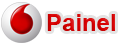
<style>
.page{position:relative;width:126px;height:43px;background:#ffffff}
.page>*{position:absolute;margin:0}
.t1{font:24px "Arial-BoldMT";color:#d80001}
</style>
<div class="page">
<p class="t1" style="left:47px;top:14px;width:68px;height:17px">Painel</p>
</div>
